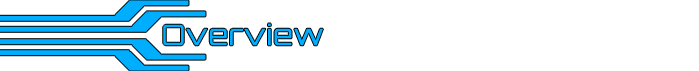
<style>
.page{position:relative;width:699px;height:71px;background:#ffffff}
.page>*{position:absolute;margin:0}
.t1{font:28px "Orbitron-Regular";color:#00aeff;font-weight:bold}
</style>
<div class="page">
<p class="t1" style="left:163px;top:23px;width:160px;height:23px">Overview</p>
</div>
